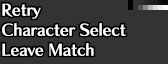
<style>
.page{position:relative;width:168px;height:64px;background:#333333}
.page>*{position:absolute;margin:0}
.t1{font:16px/20px "ChiaroStd-B";letter-spacing:-0.015em;color:#ffffff}
</style>
<div class="page">
<p class="t1" style="left:2px;top:3px;width:124px;height:53px">Retry<br>Character Select<br>Leave Match</p>
</div>
